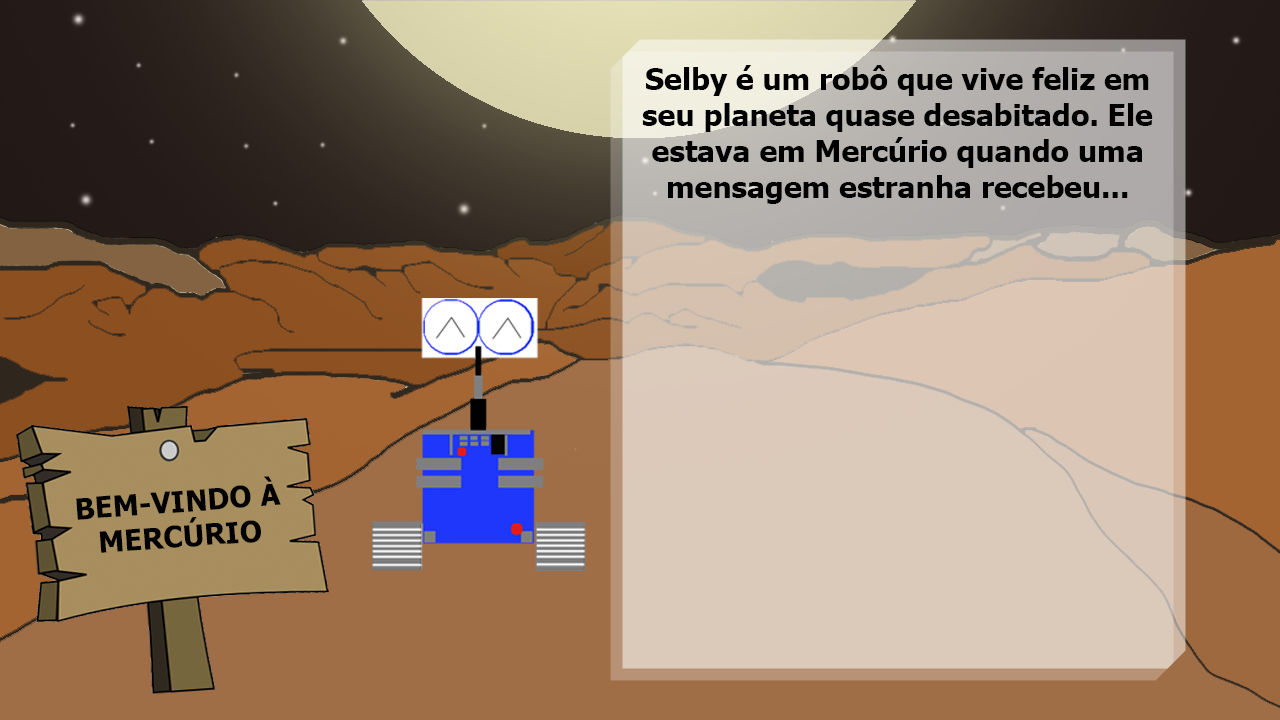
<style>
.page{position:relative;width:1280px;height:720px}
.page>*{position:absolute;margin:0}
.t1{font:30px "Tahoma-Bold";color:#000000}
.t2{font:29.4px "Tahoma-Bold";color:#000000}
</style>
<div class="page">
<p class="t1" style="left:642px;top:65px;width:511px;height:139px;text-align:center">Selby é um robô que vive feliz em seu planeta quase desabitado. Ele estava em Mercúrio quando uma mensagem estranha recebeu...</p>
<p class="t2" style="left:76px;top:476px;width:205px;height:77px;rotate:-4deg">BEM-VINDO À MERCÚRIO</p>
</div>
